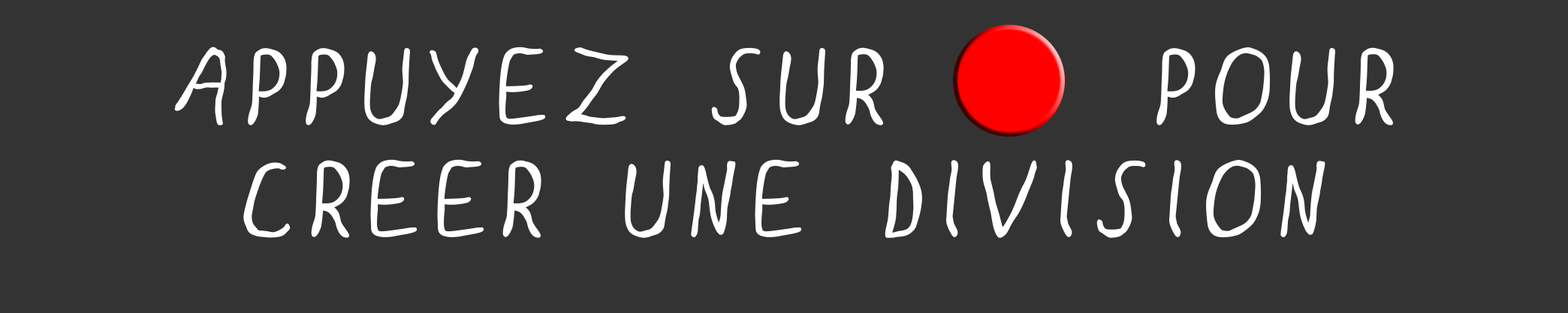
<style>
.page{position:relative;width:1568px;height:313px;background:#333333}
.page>*{position:absolute;margin:0}
.t1{font:93.9px "GLOO";letter-spacing:0.01em;color:#ffffff;font-weight:bold}
</style>
<div class="page">
<p class="t1" style="left:174px;top:47px;width:1220px;height:191px;text-align:center">APPUYEZ SUR    POUR CREER UNE DIVISION</p>
</div>
